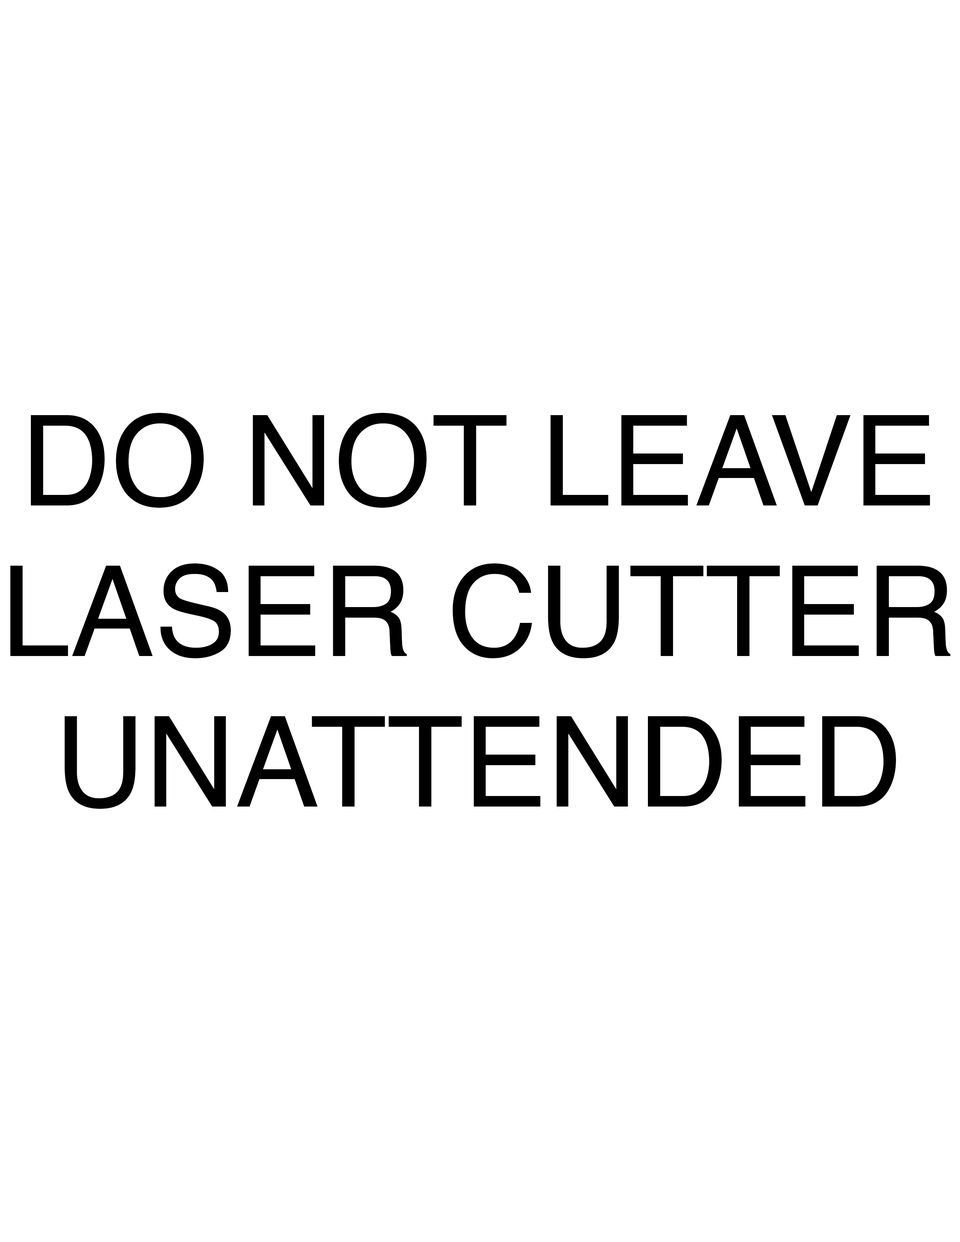
<style>
.page{position:relative;width:960px;height:1242px;background:#ffffff}
.page>*{position:absolute;margin:0}
.t1{font:125.5px "Helvetica";color:#000000}
</style>
<div class="page">
<p class="t1" style="left:10px;top:413px;width:940px;height:396px;text-align:center">DO NOT LEAVE<br>LASER CUTTER<br>UNATTENDED</p>
</div>
